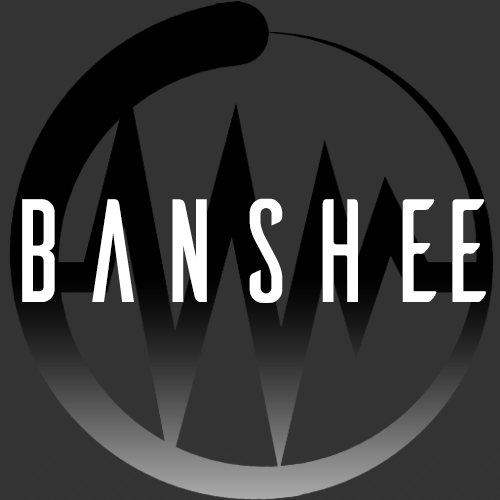
<style>
.page{position:relative;width:500px;height:500px;background:#333333}
.page>*{position:absolute;margin:0}
.t1{font:150px "Ailerons";letter-spacing:0.1em;color:#ffffff}
</style>
<div class="page">
<p class="t1" style="left:22px;top:198px;width:464px;height:105px">Banshee</p>
</div>
